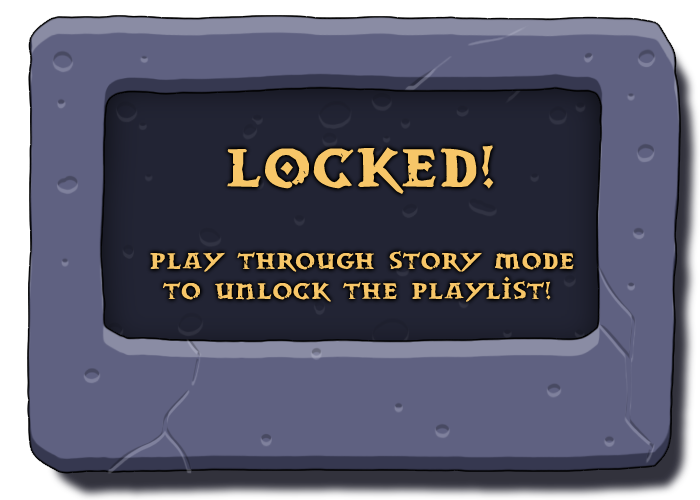
<style>
.page{position:relative;width:700px;height:500px;background:#5f6181}
.page>*{position:absolute;margin:0}
.t1{font:72px "drwnstcr";color:#e4c980}
.t2{font:30px/30px "drwnstcr";color:#e4c980}
</style>
<div class="page">
<p class="t1" style="left:227px;top:145px;width:267px;height:49px">LOCKED!</p>
<p class="t2" style="left:150px;top:250px;width:424px;height:52px">Play through story mode<br> to unlock the playlist!</p>
</div>
